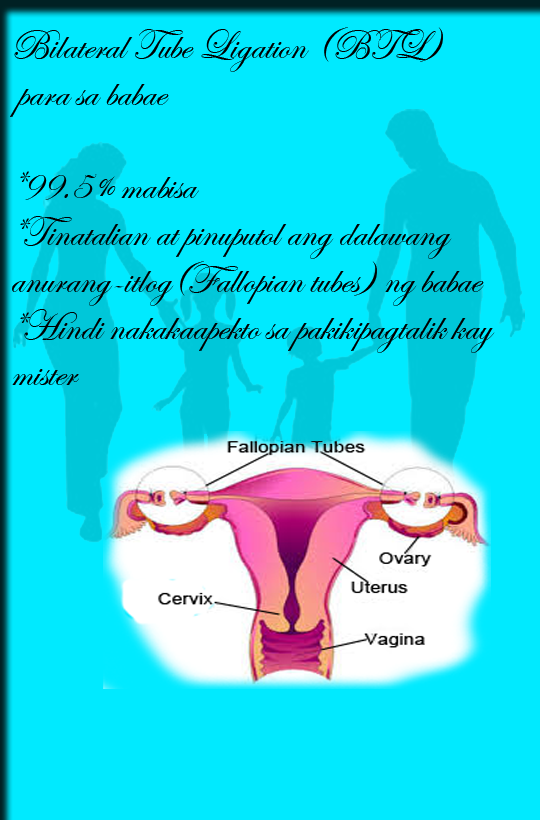
<style>
.page{position:relative;width:540px;height:820px;background:#00eaff}
.page>*{position:absolute;margin:0}
.t1{font:43.3px/46.7px "EdwardianScriptITC";color:#000000;scale:0.95 1}
</style>
<div class="page">
<p class="t1" style="left:10px;top:27px;width:485px;height:358px">Bilateral Tube Ligation (BTL)<br> para sa babae<br><br>*99.5% mabisa<br>*Tinatalian at pinuputol ang dalawang <br>anurang-itlog(Fallopian tubes) ng babae<br>*Hindi nakakaapekto sa pakikipagtalik kay <br>mister</p>
</div>
